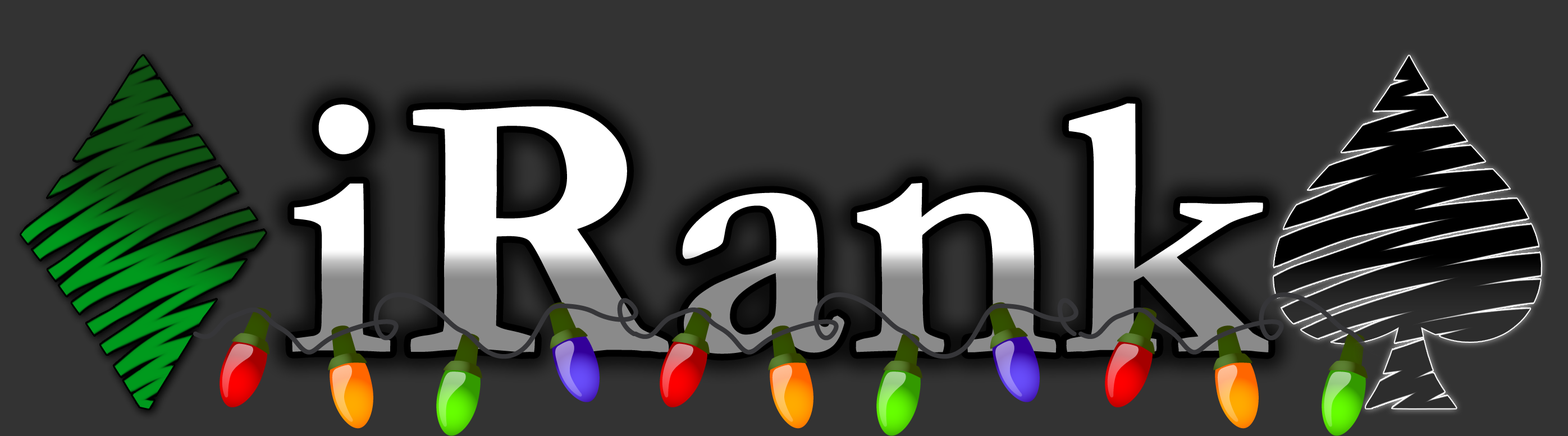
<style>
.page{position:relative;width:1568px;height:436px;background:#333333}
.page>*{position:absolute;margin:0}
.t1{font:383.7px "Garamond-Bold";letter-spacing:-0.025em;font-weight:bold}
</style>
<div class="page">
<p class="t1" style="left:292px;top:103px;width:977px;height:251px">iRank</p>
</div>
